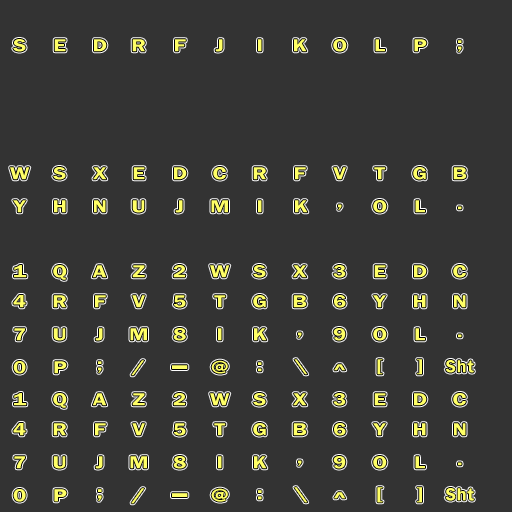
<style>
.page{position:relative;width:512px;height:512px;background:#333333}
.page>*{position:absolute;margin:0}
.t1{font:18px "FranklinGothic-Demi";letter-spacing:0.05em;color:#ffff66;scale:1.25 1}
.t2{font:36px "FranklinGothic-Demi";letter-spacing:0.05em;color:#ffff66;scale:1.8 1}
.t3{font:18px "FranklinGothic-Demi";letter-spacing:0.05em;color:#ffff66}
</style>
<div class="page">
<p class="t1" style="left:13px;top:39px;width:13px;height:13px">S</p>
<p class="t1" style="left:54px;top:39px;width:12px;height:13px">E</p>
<p class="t1" style="left:94px;top:39px;width:13px;height:13px">D</p>
<p class="t1" style="left:132px;top:39px;width:13px;height:13px">R</p>
<p class="t1" style="left:175px;top:39px;width:11px;height:13px">F</p>
<p class="t1" style="left:215px;top:39px;width:8px;height:13px">J</p>
<p class="t1" style="left:258px;top:39px;width:4px;height:13px">I</p>
<p class="t1" style="left:294px;top:39px;width:13px;height:13px">K</p>
<p class="t1" style="left:333px;top:39px;width:14px;height:13px">O</p>
<p class="t1" style="left:375px;top:39px;width:10px;height:13px">L</p>
<p class="t1" style="left:414px;top:39px;width:13px;height:13px">P</p>
<p class="t1" style="left:458px;top:40px;width:4px;height:12px">;</p>
<p class="t1" style="left:10px;top:167px;width:20px;height:13px">W</p>
<p class="t1" style="left:53px;top:167px;width:13px;height:13px">S</p>
<p class="t1" style="left:93px;top:167px;width:14px;height:13px">X</p>
<p class="t1" style="left:133px;top:167px;width:12px;height:13px">E</p>
<p class="t1" style="left:174px;top:167px;width:13px;height:13px">D</p>
<p class="t1" style="left:213px;top:167px;width:13px;height:13px">C</p>
<p class="t1" style="left:253px;top:167px;width:13px;height:13px">R</p>
<p class="t1" style="left:295px;top:167px;width:11px;height:13px">F</p>
<p class="t1" style="left:333px;top:167px;width:13px;height:13px">V</p>
<p class="t1" style="left:374px;top:167px;width:12px;height:13px">T</p>
<p class="t1" style="left:413px;top:167px;width:13px;height:13px">G</p>
<p class="t1" style="left:453px;top:167px;width:14px;height:13px">B</p>
<p class="t1" style="left:13px;top:200px;width:13px;height:13px">Y</p>
<p class="t1" style="left:54px;top:200px;width:12px;height:13px">H</p>
<p class="t1" style="left:94px;top:200px;width:12px;height:13px">N</p>
<p class="t1" style="left:132px;top:200px;width:13px;height:13px">U</p>
<p class="t1" style="left:175px;top:200px;width:8px;height:13px">J</p>
<p class="t1" style="left:211px;top:200px;width:17px;height:13px">M</p>
<p class="t1" style="left:258px;top:200px;width:4px;height:13px">I</p>
<p class="t1" style="left:295px;top:200px;width:13px;height:13px">K</p>
<p class="t1" style="left:338px;top:204px;width:4px;height:6px">,</p>
<p class="t1" style="left:373px;top:200px;width:14px;height:13px">O</p>
<p class="t1" style="left:415px;top:200px;width:10px;height:13px">L</p>
<p class="t1" style="left:458px;top:206px;width:4px;height:4px">.</p>
<p class="t1" style="left:14px;top:265px;width:13px;height:13px">1</p>
<p class="t1" style="left:53px;top:265px;width:14px;height:15px">Q</p>
<p class="t1" style="left:92px;top:265px;width:15px;height:13px">A</p>
<p class="t1" style="left:132px;top:265px;width:13px;height:13px">Z</p>
<p class="t1" style="left:173px;top:265px;width:13px;height:13px">2</p>
<p class="t1" style="left:210px;top:265px;width:20px;height:13px">W</p>
<p class="t1" style="left:253px;top:265px;width:13px;height:13px">S</p>
<p class="t1" style="left:293px;top:265px;width:14px;height:13px">X</p>
<p class="t1" style="left:333px;top:265px;width:13px;height:13px">3</p>
<p class="t1" style="left:374px;top:265px;width:12px;height:13px">E</p>
<p class="t1" style="left:414px;top:265px;width:13px;height:13px">D</p>
<p class="t1" style="left:453px;top:265px;width:13px;height:13px">C</p>
<p class="t1" style="left:13px;top:295px;width:13px;height:13px">4</p>
<p class="t1" style="left:53px;top:295px;width:13px;height:13px">R</p>
<p class="t1" style="left:95px;top:295px;width:11px;height:13px">F</p>
<p class="t1" style="left:132px;top:295px;width:13px;height:13px">V</p>
<p class="t1" style="left:173px;top:295px;width:13px;height:13px">5</p>
<p class="t1" style="left:214px;top:295px;width:12px;height:13px">T</p>
<p class="t1" style="left:253px;top:295px;width:13px;height:13px">G</p>
<p class="t1" style="left:293px;top:295px;width:14px;height:13px">B</p>
<p class="t1" style="left:334px;top:295px;width:12px;height:13px">6</p>
<p class="t1" style="left:373px;top:295px;width:13px;height:13px">Y</p>
<p class="t1" style="left:414px;top:295px;width:12px;height:13px">H</p>
<p class="t1" style="left:454px;top:295px;width:12px;height:13px">N</p>
<p class="t1" style="left:14px;top:328px;width:11px;height:13px">7</p>
<p class="t1" style="left:53px;top:328px;width:13px;height:13px">U</p>
<p class="t1" style="left:95px;top:328px;width:8px;height:13px">J</p>
<p class="t1" style="left:130px;top:328px;width:17px;height:13px">M</p>
<p class="t1" style="left:173px;top:328px;width:13px;height:13px">8</p>
<p class="t1" style="left:218px;top:328px;width:4px;height:13px">I</p>
<p class="t1" style="left:254px;top:328px;width:13px;height:13px">K</p>
<p class="t1" style="left:333px;top:328px;width:13px;height:13px">9</p>
<p class="t1" style="left:373px;top:328px;width:14px;height:13px">O</p>
<p class="t1" style="left:415px;top:328px;width:10px;height:13px">L</p>
<p class="t1" style="left:298px;top:332px;width:4px;height:6px">,</p>
<p class="t1" style="left:458px;top:334px;width:4px;height:4px">.</p>
<p class="t1" style="left:13px;top:361px;width:13px;height:13px">0</p>
<p class="t1" style="left:54px;top:361px;width:13px;height:13px">P</p>
<p class="t1" style="left:98px;top:361px;width:4px;height:12px">;</p>
<p class="t1" style="left:131px;top:360px;width:14px;height:16px">/</p>
<p class="t2" style="left:172px;top:365px;width:16px;height:4px">-</p>
<p class="t1" style="left:211px;top:360px;width:17px;height:14px">@</p>
<p class="t1" style="left:258px;top:362px;width:4px;height:10px">:</p>
<p class="t1" style="left:294px;top:359px;width:14px;height:16px">\</p>
<p class="t1" style="left:334px;top:364px;width:12px;height:7px">^</p>
<p class="t1" style="left:377px;top:359px;width:6px;height:16px">[</p>
<p class="t1" style="left:417px;top:359px;width:5px;height:16px">]</p>
<p class="t3" style="left:445px;top:360px;width:29px;height:13px">Sht</p>
<p class="t1" style="left:14px;top:393px;width:13px;height:13px">1</p>
<p class="t1" style="left:53px;top:393px;width:14px;height:15px">Q</p>
<p class="t1" style="left:92px;top:393px;width:15px;height:13px">A</p>
<p class="t1" style="left:132px;top:393px;width:13px;height:13px">Z</p>
<p class="t1" style="left:173px;top:393px;width:13px;height:13px">2</p>
<p class="t1" style="left:210px;top:393px;width:20px;height:13px">W</p>
<p class="t1" style="left:253px;top:393px;width:13px;height:13px">S</p>
<p class="t1" style="left:293px;top:393px;width:14px;height:13px">X</p>
<p class="t1" style="left:333px;top:393px;width:13px;height:13px">3</p>
<p class="t1" style="left:374px;top:393px;width:12px;height:13px">E</p>
<p class="t1" style="left:414px;top:393px;width:13px;height:13px">D</p>
<p class="t1" style="left:453px;top:393px;width:13px;height:13px">C</p>
<p class="t1" style="left:13px;top:423px;width:13px;height:13px">4</p>
<p class="t1" style="left:53px;top:423px;width:13px;height:13px">R</p>
<p class="t1" style="left:95px;top:423px;width:11px;height:13px">F</p>
<p class="t1" style="left:132px;top:423px;width:13px;height:13px">V</p>
<p class="t1" style="left:173px;top:423px;width:13px;height:13px">5</p>
<p class="t1" style="left:214px;top:423px;width:12px;height:13px">T</p>
<p class="t1" style="left:253px;top:423px;width:13px;height:13px">G</p>
<p class="t1" style="left:293px;top:423px;width:14px;height:13px">B</p>
<p class="t1" style="left:334px;top:423px;width:12px;height:13px">6</p>
<p class="t1" style="left:373px;top:423px;width:13px;height:13px">Y</p>
<p class="t1" style="left:414px;top:423px;width:12px;height:13px">H</p>
<p class="t1" style="left:454px;top:423px;width:12px;height:13px">N</p>
<p class="t1" style="left:14px;top:456px;width:11px;height:13px">7</p>
<p class="t1" style="left:53px;top:456px;width:13px;height:13px">U</p>
<p class="t1" style="left:95px;top:456px;width:8px;height:13px">J</p>
<p class="t1" style="left:130px;top:456px;width:17px;height:13px">M</p>
<p class="t1" style="left:173px;top:456px;width:13px;height:13px">8</p>
<p class="t1" style="left:218px;top:456px;width:4px;height:13px">I</p>
<p class="t1" style="left:254px;top:456px;width:13px;height:13px">K</p>
<p class="t1" style="left:298px;top:460px;width:4px;height:6px">,</p>
<p class="t1" style="left:333px;top:456px;width:13px;height:13px">9</p>
<p class="t1" style="left:373px;top:456px;width:14px;height:13px">O</p>
<p class="t1" style="left:415px;top:456px;width:10px;height:13px">L</p>
<p class="t1" style="left:458px;top:462px;width:4px;height:4px">.</p>
<p class="t1" style="left:13px;top:489px;width:13px;height:13px">0</p>
<p class="t1" style="left:54px;top:489px;width:13px;height:13px">P</p>
<p class="t1" style="left:98px;top:489px;width:4px;height:12px">;</p>
<p class="t1" style="left:131px;top:488px;width:14px;height:16px">/</p>
<p class="t2" style="left:172px;top:493px;width:16px;height:4px">-</p>
<p class="t1" style="left:211px;top:488px;width:17px;height:14px">@</p>
<p class="t1" style="left:258px;top:490px;width:4px;height:10px">:</p>
<p class="t1" style="left:294px;top:487px;width:14px;height:16px">\</p>
<p class="t1" style="left:334px;top:492px;width:12px;height:7px">^</p>
<p class="t1" style="left:377px;top:487px;width:6px;height:16px">[</p>
<p class="t1" style="left:417px;top:487px;width:5px;height:16px">]</p>
<p class="t3" style="left:445px;top:488px;width:29px;height:13px">Sht</p>
</div>
